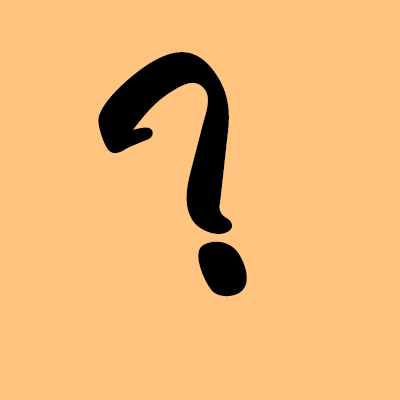
<style>
.page{position:relative;width:400px;height:400px;background:#ffc580}
.page>*{position:absolute;margin:0}
.t1{font:351.5px "BrushScriptStd";color:#000000;scale:1.05 1}
</style>
<div class="page">
<p class="t1" style="left:98px;top:52px;width:149px;height:245px;rotate:-31deg">?</p>
</div>
